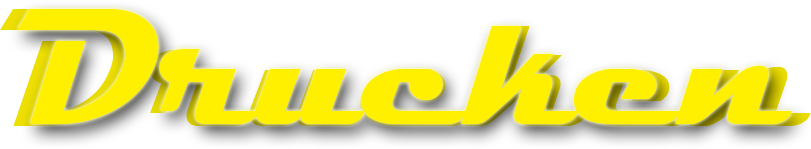
<style>
.page{position:relative;width:811px;height:149px;background:#ffffff}
.page>*{position:absolute;margin:0}
.t1{font:170.4px "Magneto-Bold";color:#eddf00}
.t2{font:167px "Magneto-Bold";color:#fff000}
</style>
<div class="page">
<p class="t1" style="left:0px;top:9px;width:811px;height:117px">Drucken</p>
<p class="t2" style="left:17px;top:9px;width:775px;height:115px">Drucken</p>
</div>
